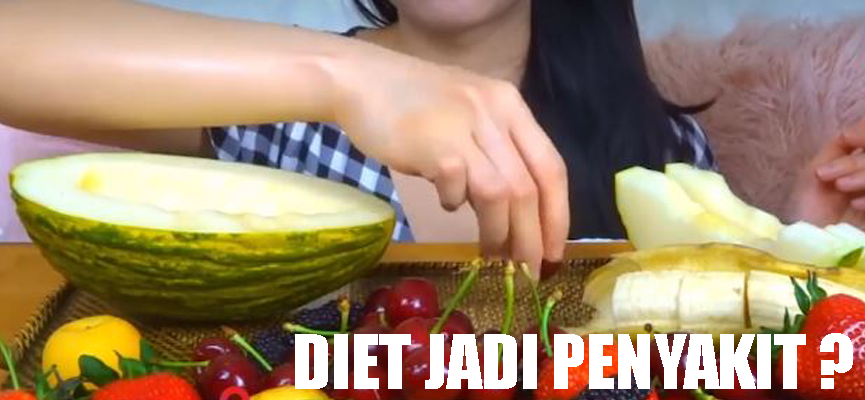
<style>
.page{position:relative;width:865px;height:400px}
.page>*{position:absolute;margin:0}
.t1{font:69.3px "Impact";color:#ffffff}
</style>
<div class="page">
<p class="t1" style="left:295px;top:333px;width:558px;height:56px">DIET JADI PENYAKIT ?</p>
</div>
